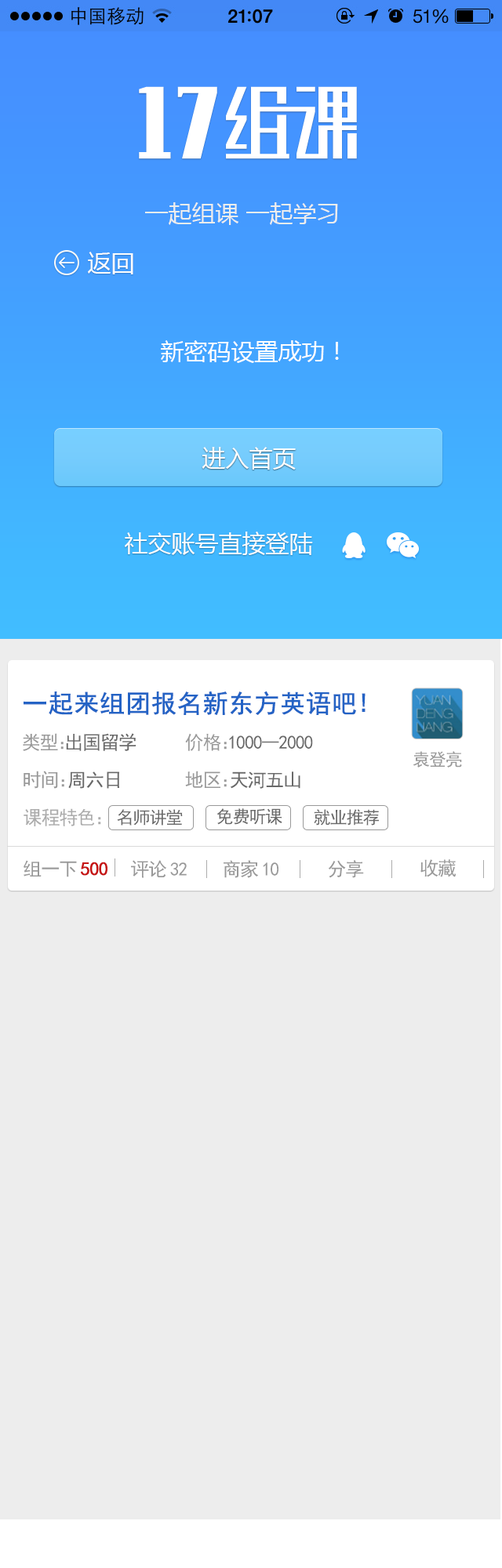
<style>
.page{position:relative;width:502px;height:1568px;background:#ededed}
.page>*{position:absolute;margin:0}
.t1{font:23.5px "MicrosoftYaHei";color:#ededed}
.t2{font:23.5px "MicrosoftYaHei";color:#fefefe}
.t3{font:25.1px "SimHei";color:#2463c5;font-weight:bold}
.t4{font:18.8px "SimHei";letter-spacing:-0.05em;color:#696969}
.t5{font:18.8px "SimHei";letter-spacing:-0.05em;color:#999999}
.t6{font:18.8px "SimHei";letter-spacing:-0.62em;color:#999999}
.t7{font:17.2px "SimHei";letter-spacing:-0.05em;color:#999999}
.t8{font:18.8px "SimHei";letter-spacing:-0.5em;color:#999999}
.t9{font:18.8px "SimHei";letter-spacing:-0.52em;color:#999999}
.t10{font:18.8px "SimHei";letter-spacing:-0.05em;color:#acacac}
.t11{font:18.8px "SimHei";color:#acacac}
.t12{font:17.2px "SimHei";letter-spacing:-0.05em;color:#696969}
.t13{font:18.8px "SimHei";letter-spacing:-0.05em;color:#c61414;font-weight:bold}
.t14{font:18.8px "SimHei";letter-spacing:0.15em;color:#999999}
</style>
<div class="page">
<p class="t1" style="left:145px;top:202px;width:193px;height:23px">一起组课 一起学习</p>
<p class="t2" style="left:88px;top:252px;width:45px;height:22px">返回</p>
<p class="t2" style="left:161px;top:340px;width:178px;height:23px">新密码设置成功！</p>
<p class="t2" style="left:201px;top:447px;width:95px;height:23px">进入首页</p>
<p class="t2" style="left:125px;top:532px;width:188px;height:23px">社交账号直接登陆</p>
<p class="t3" style="left:24px;top:691px;width:341px;height:24px">一起来组团报名新东方英语吧!</p>
<p class="t4" style="left:23px;top:733px;width:113px;height:18px"><span class="t5">类型</span><span class="t6">：</span>出国留学</p>
<p class="t4" style="left:185px;top:733px;width:128px;height:18px"><span class="t5">价格</span><span class="t6">：</span>1000--2000</p>
<p class="t7" style="left:412px;top:751px;width:50px;height:17px">袁登亮</p>
<p class="t4" style="left:24px;top:771px;width:95px;height:18px"><span class="t5">时间</span><span class="t8">：</span>周六日</p>
<p class="t4" style="left:185px;top:771px;width:115px;height:18px"><span class="t5">地区</span><span class="t9">：</span>天河五山</p>
<p class="t10" style="left:24px;top:808px;width:77px;height:18px">课程特色<span class="t11">：</span></p>
<p class="t12" style="left:117px;top:809px;width:66px;height:17px">名师讲堂</p>
<p class="t12" style="left:216px;top:808px;width:66px;height:17px">免费听课</p>
<p class="t12" style="left:314px;top:809px;width:65px;height:17px">就业推荐</p>
<p class="t13" style="left:24px;top:860px;width:83px;height:17px"><span class="t5">组一</span><span class="t14">下</span>500</p>
<p class="t5" style="left:131px;top:860px;width:56px;height:18px">评<span class="t14">论</span>32</p>
<p class="t5" style="left:223px;top:860px;width:55px;height:18px">商<span class="t14">家</span>10</p>
<p class="t5" style="left:328px;top:860px;width:36px;height:18px">分享</p>
<p class="t5" style="left:420px;top:859px;width:36px;height:18px">收藏</p>
</div>
